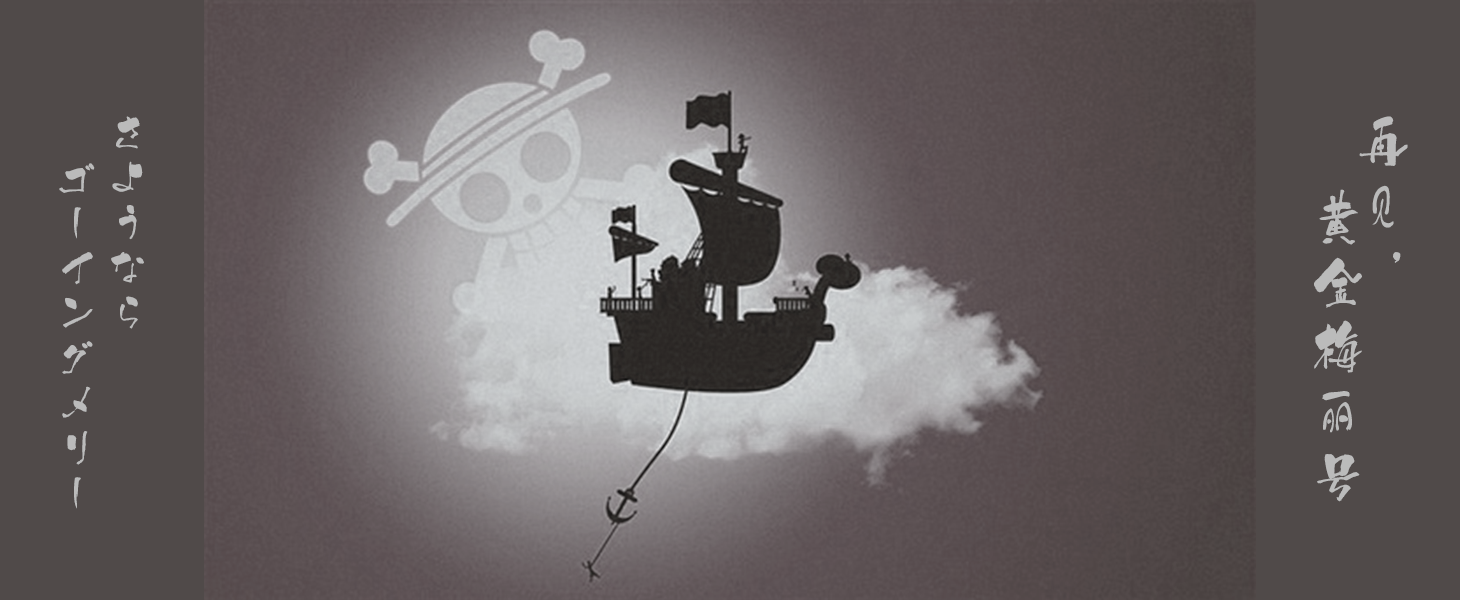
<style>
.page{position:relative;width:1460px;height:600px;background:#504a49}
.page>*{position:absolute;margin:0}
.t1{font:45px/51px "GeikaiSuikou";color:#bfbfbf}
.t2{font:45px/46px "GeikaiSuikou";letter-spacing:0.2em;color:#bfbfbf;scale:1.2 1}
.t3{font:45px/46px "FZZJ-TTMBFONT";letter-spacing:0.2em;color:#bfbfbf;scale:1.2 1}
</style>
<div class="page">
<p class="t1" style="left:59px;top:116px;width:85px;height:393px">さようなら<br>  ゴーイングメリー</p>
<p class="t2" style="left:1314px;top:116px;width:94px;height:386px">再<span class="t3">见</span>，<br>  黄金梅<span class="t3">丽</span>号</p>
</div>
